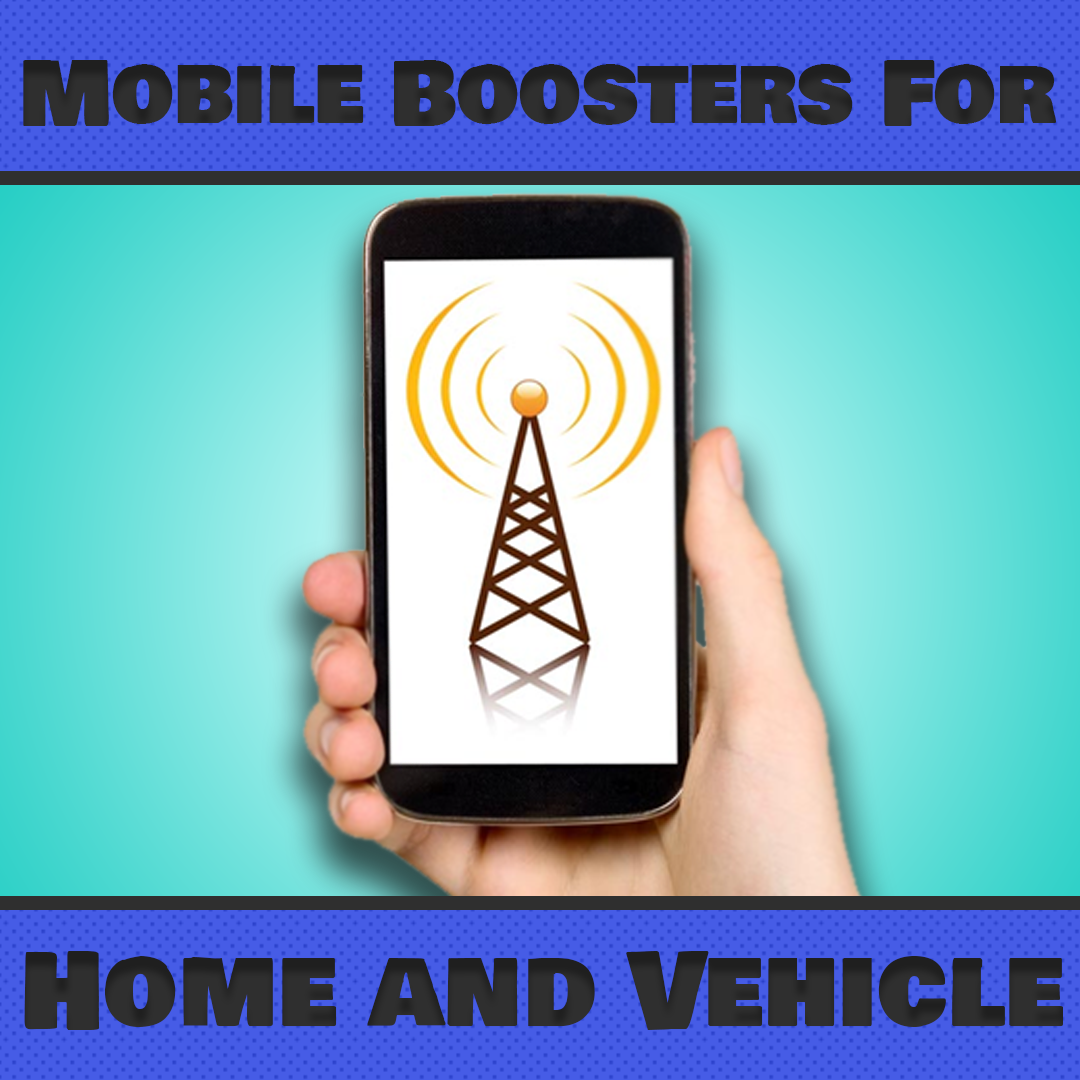
<style>
.page{position:relative;width:1080px;height:1080px}
.page>*{position:absolute;margin:0}
.t1{font:87.5px "BowlbyOneSC-Regular";color:#2b2b2b}
.t2{font:104.2px "BowlbyOneSC-Regular";color:#2d2d2d}
</style>
<div class="page">
<p class="t1" style="left:23px;top:60px;width:1033px;height:66px">Mobile Boosters For</p>
<p class="t2" style="left:24px;top:951px;width:1039px;height:79px">Home and Vehicle</p>
</div>
